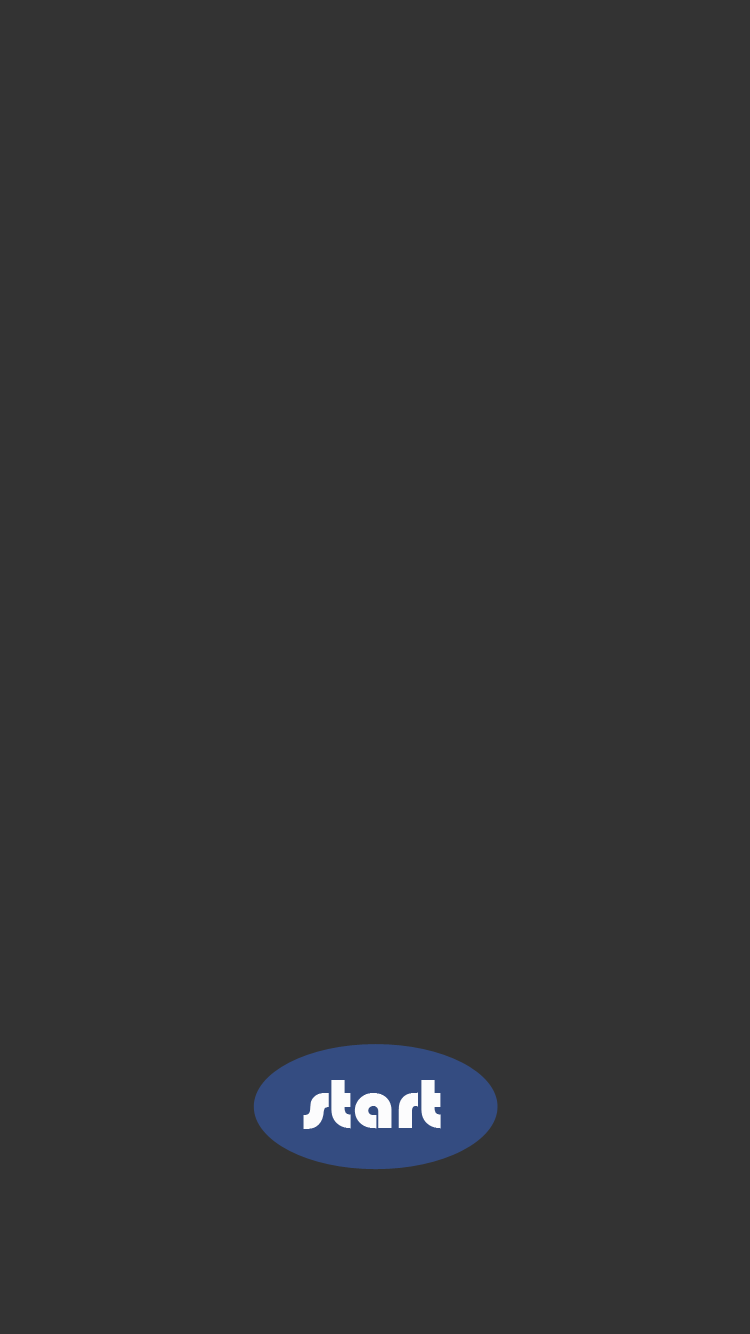
<style>
.page{position:relative;width:750px;height:1334px;background:#333333}
.page>*{position:absolute;margin:0}
.t1{font:72px "Bauhaus93";color:#fcfcfd}
</style>
<div class="page">
<p class="t1" style="left:303px;top:1080px;width:138px;height:49px">start</p>
</div>
